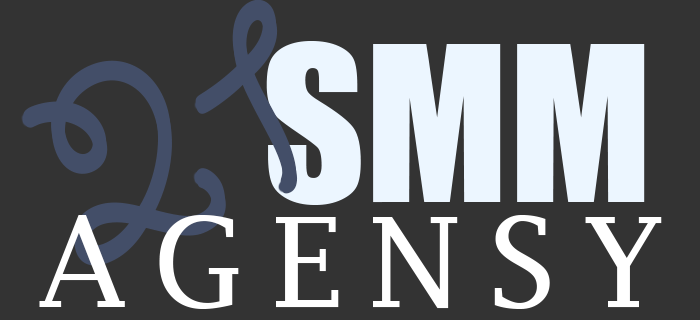
<style>
.page{position:relative;width:700px;height:320px;background:#333333}
.page>*{position:absolute;margin:0}
.t1{font:200px "Impact";color:#ecf6ff}
.t2{font:125px "LucidaFax";letter-spacing:0.2em;color:#ffffff}
</style>
<div class="page">
<p class="t1" style="left:266px;top:41px;width:379px;height:164px">SMM</p>
<p class="t2" style="left:39px;top:215px;width:623px;height:94px">AGENSY</p>
</div>
